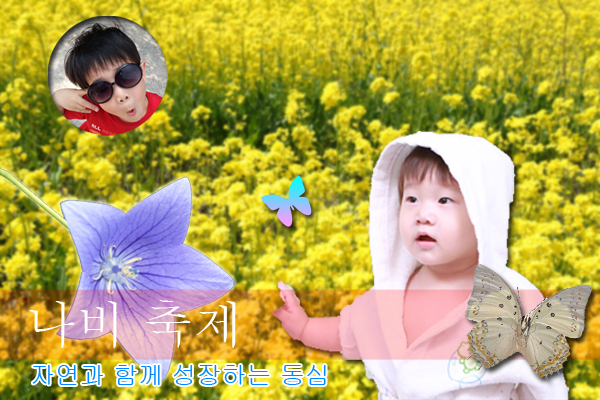
<style>
.page{position:relative;width:600px;height:400px}
.page>*{position:absolute;margin:0}
.t1{font:50px "Batang";color:#ffffff}
.t2{font:25px "Gulim";color:#0088ff}
</style>
<div class="page">
<p class="t1" style="left:29px;top:300px;width:207px;height:48px">나비 축제</p>
<p class="t2" style="left:32px;top:365px;width:294px;height:20px">자연과 함께 성장하는 동심</p>
</div>
